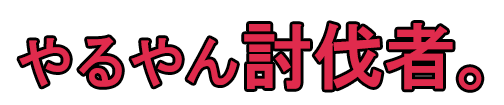
<style>
.page{position:relative;width:504px;height:105px;background:#ffffff}
.page>*{position:absolute;margin:0}
.t1{font:56px "HGGothicE";color:#e02b4d}
.t2{font:72px "HGGothicE";color:#e02b4d}
</style>
<div class="page">
<p class="t1" style="left:19px;top:23px;width:463px;height:67px">やるやん<span class="t2">討伐者。</span></p>
</div>
